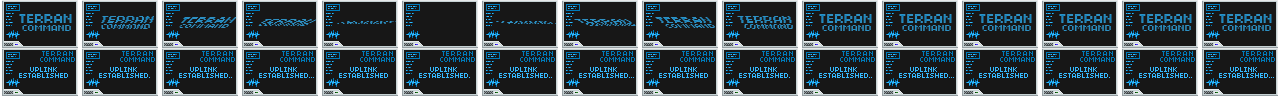
<style>
.page{position:relative;width:1280px;height:96px;background:#171717}
.page>*{position:absolute;margin:0}
.t1{font:8px/6px "04b03";color:#007ab9;text-transform:uppercase;scale:0.95 1}
.t2{font:8px/6px "04b03";color:#007ab9;text-transform:uppercase;scale:1.1 1}
.t3{font:8.6px/6px "04b03";color:#35baff;text-transform:uppercase;scale:0.92 1}
</style>
<div class="page">
<p class="t1" style="left:40px;top:51px;width:35px;height:11px;text-align:center"><span class="t2">TERRAN<br></span>COMMAND</p>
<p class="t1" style="left:120px;top:51px;width:35px;height:11px;text-align:center"><span class="t2">TERRAN<br></span>COMMAND</p>
<p class="t1" style="left:200px;top:51px;width:35px;height:11px;text-align:center"><span class="t2">TERRAN<br></span>COMMAND</p>
<p class="t1" style="left:280px;top:51px;width:35px;height:11px;text-align:center"><span class="t2">TERRAN<br></span>COMMAND</p>
<p class="t1" style="left:360px;top:51px;width:35px;height:11px;text-align:center"><span class="t2">TERRAN<br></span>COMMAND</p>
<p class="t1" style="left:440px;top:51px;width:35px;height:11px;text-align:center"><span class="t2">TERRAN<br></span>COMMAND</p>
<p class="t1" style="left:520px;top:51px;width:35px;height:11px;text-align:center"><span class="t2">TERRAN<br></span>COMMAND</p>
<p class="t1" style="left:600px;top:51px;width:35px;height:11px;text-align:center"><span class="t2">TERRAN<br></span>COMMAND</p>
<p class="t1" style="left:680px;top:51px;width:35px;height:11px;text-align:center"><span class="t2">TERRAN<br></span>COMMAND</p>
<p class="t1" style="left:760px;top:51px;width:35px;height:11px;text-align:center"><span class="t2">TERRAN<br></span>COMMAND</p>
<p class="t1" style="left:840px;top:51px;width:35px;height:11px;text-align:center"><span class="t2">TERRAN<br></span>COMMAND</p>
<p class="t1" style="left:920px;top:51px;width:35px;height:11px;text-align:center"><span class="t2">TERRAN<br></span>COMMAND</p>
<p class="t1" style="left:1000px;top:51px;width:35px;height:11px;text-align:center"><span class="t2">TERRAN<br></span>COMMAND</p>
<p class="t1" style="left:1080px;top:51px;width:35px;height:11px;text-align:center"><span class="t2">TERRAN<br></span>COMMAND</p>
<p class="t1" style="left:1160px;top:51px;width:35px;height:11px;text-align:center"><span class="t2">TERRAN<br></span>COMMAND</p>
<p class="t1" style="left:1240px;top:51px;width:35px;height:11px;text-align:center"><span class="t2">TERRAN<br></span>COMMAND</p>
<p class="t3" style="left:19px;top:67px;width:49px;height:11px;text-align:center">UPLINK<br>established</p>
<p class="t3" style="left:99px;top:67px;width:49px;height:11px;text-align:center">UPLINK<br>established</p>
<p class="t3" style="left:179px;top:67px;width:49px;height:11px;text-align:center">UPLINK<br>established</p>
<p class="t3" style="left:259px;top:67px;width:49px;height:11px;text-align:center">UPLINK<br>established</p>
<p class="t3" style="left:339px;top:67px;width:49px;height:11px;text-align:center">UPLINK<br>established</p>
<p class="t3" style="left:419px;top:67px;width:49px;height:11px;text-align:center">UPLINK<br>established</p>
<p class="t3" style="left:499px;top:67px;width:49px;height:11px;text-align:center">UPLINK<br>established</p>
<p class="t3" style="left:579px;top:67px;width:49px;height:11px;text-align:center">UPLINK<br>established</p>
<p class="t3" style="left:659px;top:67px;width:49px;height:11px;text-align:center">UPLINK<br>established</p>
<p class="t3" style="left:739px;top:67px;width:49px;height:11px;text-align:center">UPLINK<br>established</p>
<p class="t3" style="left:819px;top:67px;width:49px;height:11px;text-align:center">UPLINK<br>established</p>
<p class="t3" style="left:899px;top:67px;width:49px;height:11px;text-align:center">UPLINK<br>established</p>
<p class="t3" style="left:979px;top:67px;width:49px;height:11px;text-align:center">UPLINK<br>established</p>
<p class="t3" style="left:1059px;top:67px;width:49px;height:11px;text-align:center">UPLINK<br>established</p>
<p class="t3" style="left:1139px;top:67px;width:49px;height:11px;text-align:center">UPLINK<br>established</p>
<p class="t3" style="left:1219px;top:67px;width:49px;height:11px;text-align:center">UPLINK<br>established</p>
</div>
